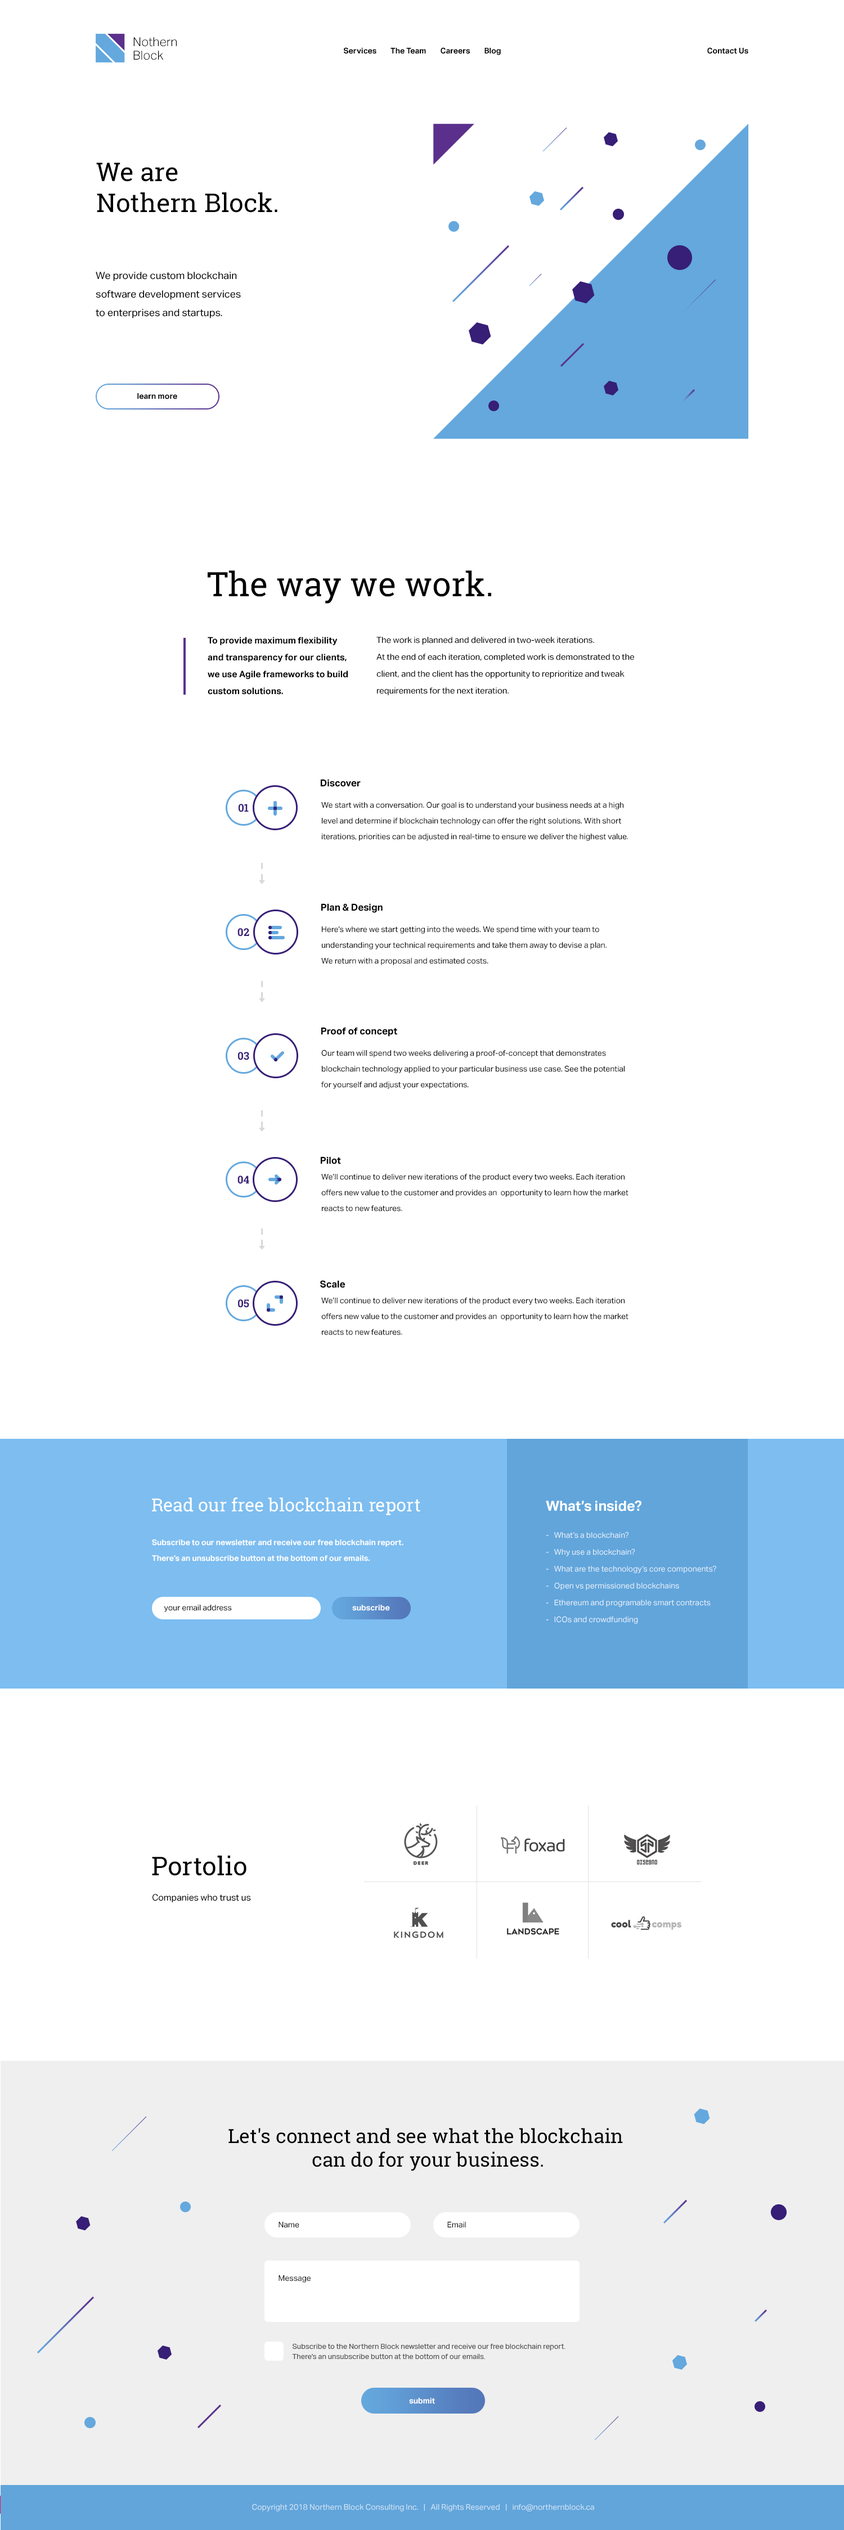
<style>
.page{position:relative;width:844px;height:2530px;background:#ffffff}
.page>*{position:absolute;margin:0}
.t1{font:12.4px/13.5px "AktivGroteskCorp-Light";color:#000000}
.t2{font:7.9px "AktivGroteskCorp-Bold";color:#000000}
.t3{font:25.9px "RobotoSlab-Regular";color:#000000}
.t4{font:10.1px/18.6px "AktivGroteskCorp-Regular";color:#000000}
.t5{font:33.8px "RobotoSlab-Regular";color:#000000}
.t6{font:9px/16.9px "AktivGroteskCorp-Bold";color:#000000}
.t7{font:8.4px/16.9px "AktivGroteskCorp-Regular";color:#000000}
.t8{font:9.6px "AktivGroteskCorp-Bold";color:#000000}
.t9{font:10.7px "RobotoSlab-Bold";color:#371e76}
.t10{font:7.9px/15.8px "AktivGroteskCorp-Regular";color:#000000}
.t11{font:18px "RobotoSlab-Regular";color:#ffffff}
.t12{font:14.1px "AktivGroteskCorp-Bold";color:#ffffff}
.t13{font:7.9px/15.8px "AktivGroteskCorp-Bold";color:#ffffff}
.t14{font:7.9px/16.9px "AktivGroteskCorp-Regular";color:#e4eef8}
.t15{font:7.9px "AktivGroteskCorp-Regular";color:#000000}
.t16{font:7.9px "AktivGroteskCorp-Bold";color:#ffffff}
.t17{font:9px "AktivGroteskCorp-Regular";color:#000000}
.t18{font:19.7px "RobotoSlab-Regular";color:#000000}
.t19{font:7.3px/10.1px "AktivGroteskCorp-Regular";color:#545454}
.t20{font:7.9px "AktivGroteskCorp-Regular";color:#d3e4f4}
</style>
<div class="page">
<p class="t1" style="left:133px;top:37px;width:44px;height:23px">Nothern<br>Block</p>
<p class="t2" style="left:344px;top:47px;width:157px;height:8px">Services        The Team        Careers        Blog</p>
<p class="t2" style="left:707px;top:47px;width:41px;height:7px">Contact Us</p>
<p class="t3" style="left:96px;top:163px;width:181px;height:50px">We are<br>Nothern Block.</p>
<p class="t4" style="left:96px;top:272px;width:145px;height:46px">We provide custom blockchain <br>software development services <br>to enterprises and startups.</p>
<p class="t2" style="left:137px;top:393px;width:40px;height:6px">learn more</p>
<p class="t5" style="left:208px;top:570px;width:283px;height:34px">The way we work.</p>
<p class="t6" style="left:208px;top:637px;width:140px;height:58px">To provide maximum flexibility and transparency for our clients, we use Agile frameworks to build custom solutions.</p>
<p class="t7" style="left:376px;top:637px;width:258px;height:58px">The work is planned and delivered in two-week iterations. <br>At the end of each iteration, completed work is demonstrated to the client, and the client has the opportunity to reprioritize and tweak requirements for the next iteration.</p>
<p class="t8" style="left:321px;top:779px;width:40px;height:8px">Discover</p>
<p class="t9" style="left:238px;top:804px;width:11px;height:8px">01</p>
<p class="t10" style="left:321px;top:802px;width:307px;height:39px">We start with a conversation. Our goal is to understand your business needs at a high level and determine if blockchain technology can offer the right solutions. With short iterations, priorities can be adjusted in real-time to ensure we deliver the highest value.</p>
<p class="t8" style="left:321px;top:903px;width:61px;height:10px">Plan &amp; Design</p>
<p class="t9" style="left:237px;top:928px;width:12px;height:9px">02</p>
<p class="t10" style="left:321px;top:926px;width:285px;height:39px">Here’s where we start getting into the weeds. We spend time with your team to understanding your technical requirements and take them away to devise a plan. <br>We return with a proposal and estimated costs.</p>
<p class="t8" style="left:321px;top:1027px;width:76px;height:10px">Proof of concept</p>
<p class="t10" style="left:321px;top:1050px;width:303px;height:39px">Our team will spend two weeks delivering a proof-of-concept that demonstrates blockchain technology applied to your particular business use case. See the potential for yourself and adjust your expectations.</p>
<p class="t9" style="left:238px;top:1052px;width:11px;height:8px">03</p>
<p class="t8" style="left:321px;top:1156px;width:20px;height:8px">Pilot</p>
<p class="t9" style="left:237px;top:1176px;width:12px;height:8px">04</p>
<p class="t10" style="left:321px;top:1174px;width:307px;height:38px">We’ll continue to deliver new iterations of the product every two weeks. Each iteration offers new value to the customer and provides an  opportunity to learn how the market reacts to new features.</p>
<p class="t8" style="left:320px;top:1280px;width:25px;height:8px">Scale</p>
<p class="t9" style="left:238px;top:1299px;width:11px;height:9px">05</p>
<p class="t10" style="left:321px;top:1298px;width:307px;height:37px">We’ll continue to deliver new iterations of the product every two weeks. Each iteration offers new value to the customer and provides an  opportunity to learn how the market reacts to new features.</p>
<p class="t11" style="left:152px;top:1497px;width:268px;height:18px">Read our free blockchain report</p>
<p class="t12" style="left:546px;top:1500px;width:95px;height:11px">What’s inside?</p>
<p class="t13" style="left:152px;top:1539px;width:251px;height:23px">Subscribe to our newsletter and receive our free blockchain report. <br>There’s an unsubscribe button at the bottom of our emails.</p>
<p class="t14" style="left:546px;top:1532px;width:170px;height:92px">-   What’s a blockchain?<br>-   Why use a blockchain?<br>-   What are the technology’s core components?<br>-   Open vs permissioned blockchains<br>-   Ethereum and programable smart contracts<br>-   ICOs and crowdfunding</p>
<p class="t15" style="left:164px;top:1605px;width:68px;height:7px">your email address</p>
<p class="t16" style="left:352px;top:1605px;width:38px;height:6px;opacity:0.97">subscribe</p>
<p class="t3" style="left:152px;top:1856px;width:94px;height:20px">Portolio</p>
<p class="t17" style="left:152px;top:1894px;width:99px;height:8px">Companies who trust us</p>
<p class="t18" style="left:228px;top:2128px;width:395px;height:43px;text-align:center">Let's connect and see what the blockchain <br>can do for your business.</p>
<p class="t15" style="left:278px;top:2222px;width:21px;height:6px">Name</p>
<p class="t15" style="left:447px;top:2222px;width:19px;height:6px">Email</p>
<p class="t15" style="left:278px;top:2275px;width:32px;height:8px">Message</p>
<p class="t19" style="left:292px;top:2344px;width:273px;height:15px">Subscribe to the Northern Block newsletter and receive our free blockchain report.<br>There’s an unsubscribe button at the bottom of our emails.</p>
<p class="t16" style="left:409px;top:2398px;width:26px;height:6px">submit</p>
<p class="t20" style="left:252px;top:2504px;width:342px;height:8px">Copyright 2018 Northern Block Consulting Inc.   |   All Rights Reserved   |   info@northernblock.ca</p>
</div>
